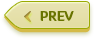
<style>
.page{position:relative;width:94px;height:39px}
.page>*{position:absolute;margin:0}
.t1{font:13px "DiavloBlack-Regular";color:#687300;text-transform:uppercase}
</style>
<div class="page">
<p class="t1" style="left:40px;top:11px;width:34px;height:10px">Prev</p>
</div>
